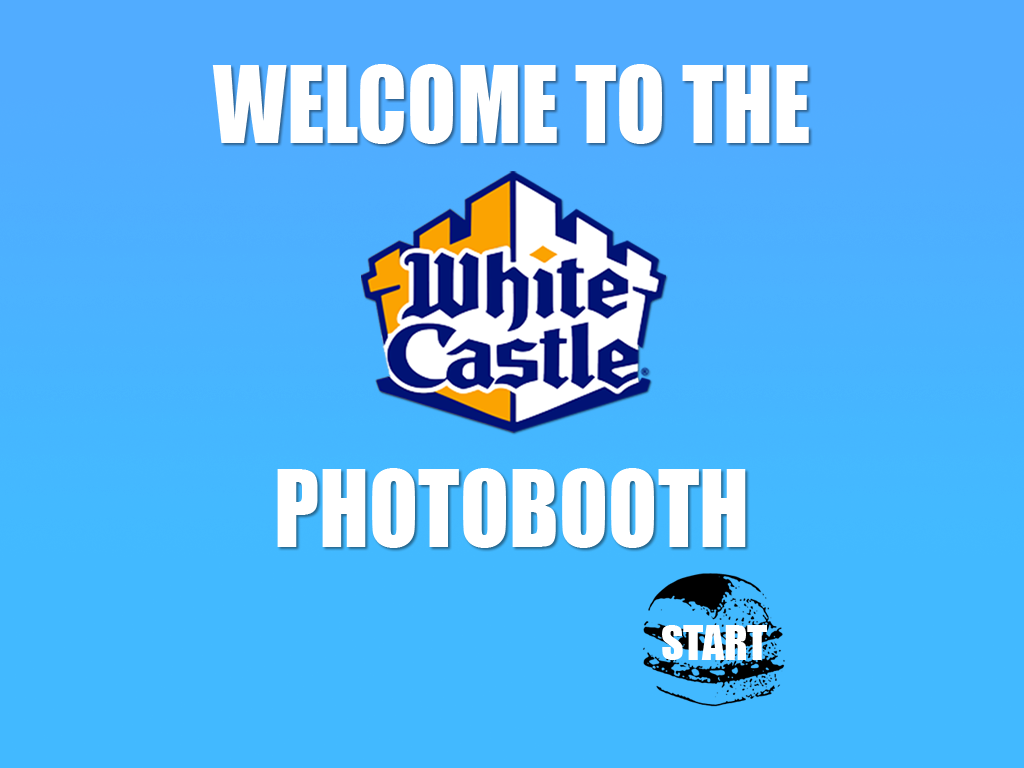
<style>
.page{position:relative;width:1024px;height:768px;background:#42b9ff}
.page>*{position:absolute;margin:0}
.t1{font:98.6px "Impact";color:#ffffff;scale:0.91 1}
.t2{font:43.7px "Impact";color:#ffffff}
</style>
<div class="page">
<p class="t1" style="left:212px;top:64px;width:597px;height:80px">WELCOME TO THE</p>
<p class="t1" style="left:277px;top:468px;width:469px;height:80px">PHOTOBOOTH</p>
<p class="t2" style="left:662px;top:625px;width:105px;height:35px">START</p>
</div>
